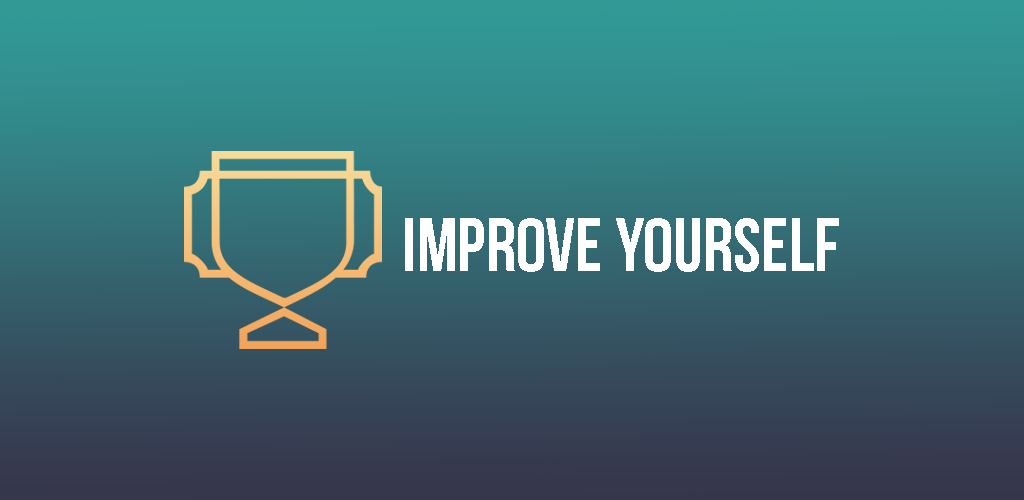
<style>
.page{position:relative;width:1024px;height:500px}
.page>*{position:absolute;margin:0}
.t1{font:75px "BebasNeue";color:#ffffff}
</style>
<div class="page">
<p class="t1" style="left:405px;top:218px;width:434px;height:54px">Improve Yourself</p>
</div>
